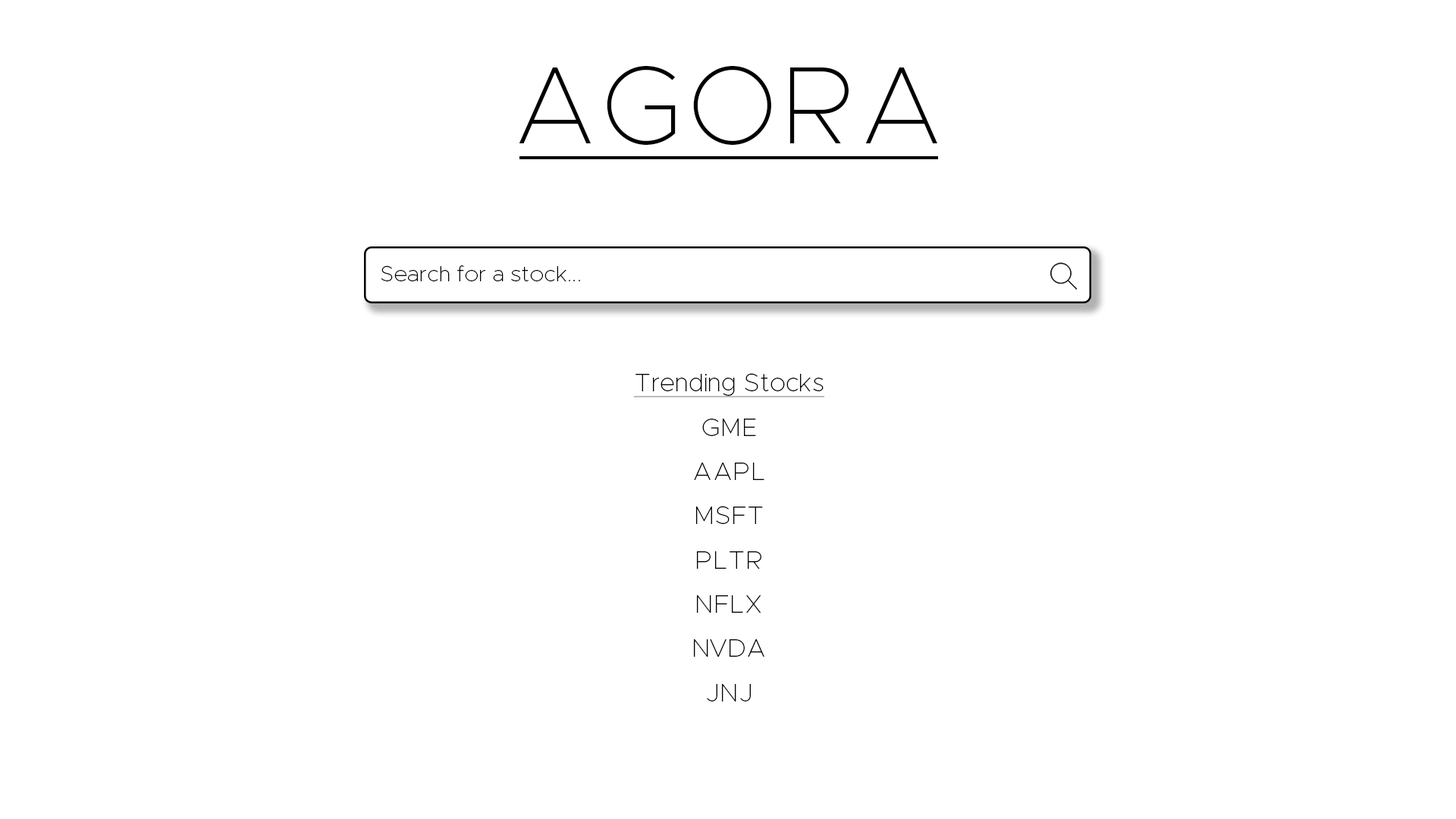
<style>
.page{position:relative;width:1456px;height:819px;background:#ffffff}
.page>*{position:absolute;margin:0}
.t1{font:110.5px "Metropolis-Thin";color:#000000}
.t2{font:22.1px "Metropolis-Thin";color:#000000}
.t3{font:27.6px "Metropolis-Thin";color:#000000}
.t4{font:25.3px/44.2px "Metropolis-Thin";color:#000000}
.t5{font:25.3px "Metropolis-Thin";color:#000000;text-decoration:underline}
</style>
<div class="page">
<p class="t1" style="left:519px;top:66px;width:418px;height:79px">AGORA</p>
<p class="t2" style="left:381px;top:265px;width:199px;height:16px"><span class="t3"><br>  </span>Search for a stock...</p>
<p class="t4" style="left:633px;top:373px;width:192px;height:328px;text-align:center"><span class="t5">Trending Stocks<br></span>GME<br>AAPL<br>MSFT<br>PLTR<br>NFLX<br>NVDA<br>JNJ</p>
</div>
